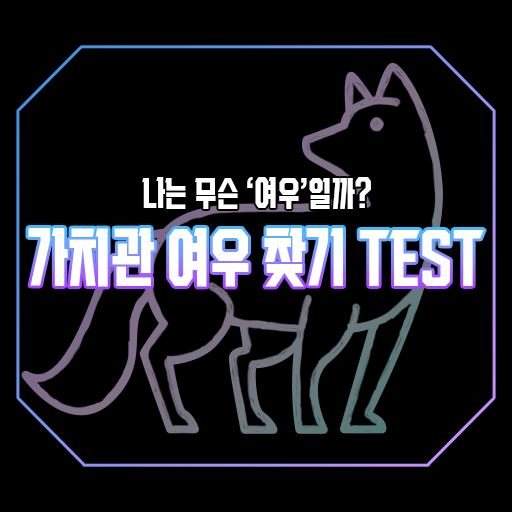
<style>
.page{position:relative;width:512px;height:512px;background:#000000}
.page>*{position:absolute;margin:0}
.t1{font:33.3px "VITRO-INSPIRE-TTF";letter-spacing:0.015em;color:#ffffff}
.t2{font:62.5px "VITRO-INSPIRE-TTF";color:#ffffff}
</style>
<div class="page">
<p class="t1" style="left:142px;top:177px;width:229px;height:32px">나는 무슨 ‘여우’일까?</p>
<p class="t2" style="left:28px;top:228px;width:456px;height:59px">가치관 여우 찾기 TEST</p>
</div>
